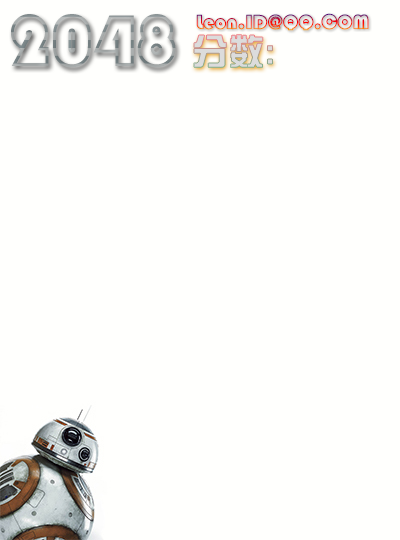
<style>
.page{position:relative;width:400px;height:540px;background:#fffffd}
.page>*{position:absolute;margin:0}
.t1{font:72px "STCaiyun";letter-spacing:0.02em}
.t2{font:20px "STCaiyun";letter-spacing:0.02em}
.t3{font:36px "FZZYJW--GB1-0";letter-spacing:0.02em;color:#dcdcdc}
</style>
<div class="page">
<p class="t1" style="left:11px;top:14px;width:165px;height:54px">2048</p>
<p class="t2" style="left:196px;top:13px;width:173px;height:18px">Leon.ID@QQ.COM</p>
<p class="t3" style="left:194px;top:34px;width:79px;height:34px">分数:</p>
</div>
